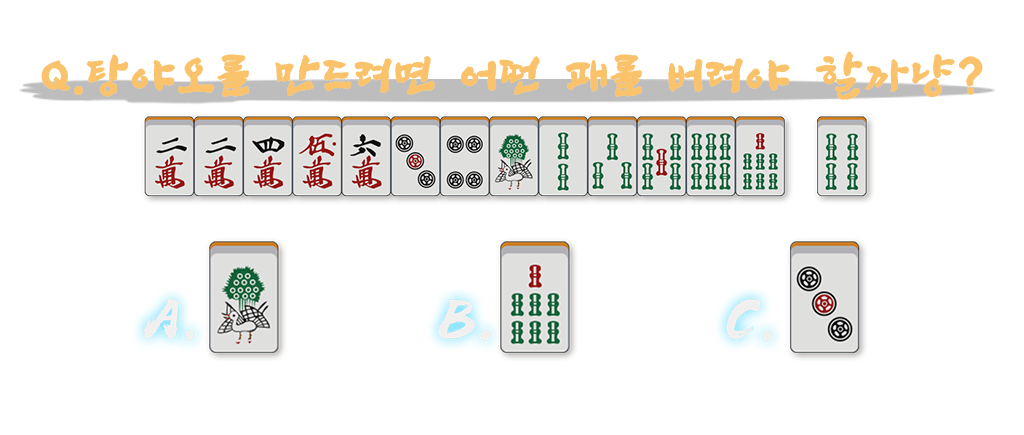
<style>
.page{position:relative;width:1024px;height:435px;background:#ffffff}
.page>*{position:absolute;margin:0}
.t1{font:47px "SangSangRockOTF";letter-spacing:0.06em;color:#fac26a;font-weight:bold}
</style>
<div class="page">
<p class="t1" style="left:41px;top:51px;width:942px;height:49px">Q.탕야오를 만드려면 어떤 패를 버려야 할까냥?</p>
</div>
